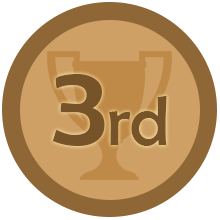
<style>
.page{position:relative;width:220px;height:220px;background:#cea065}
.page>*{position:absolute;margin:0}
.t1{font:70px "BerlinSansFB-Reg";color:#775329}
.t2{font:120px "BerlinSansFB-Reg";color:#775329}
</style>
<div class="page">
<p class="t1" style="left:52px;top:74px;width:115px;height:72px"><span class="t2">3</span>rd</p>
</div>
